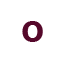
<style>
.page{position:relative;width:64px;height:64px;background:#ffffff}
.page>*{position:absolute;margin:0}
.t1{font:45.3px "Corbel-Bold";color:#55082a}
</style>
<div class="page">
<p class="t1" style="left:22px;top:21px;width:21px;height:21px">0</p>
</div>
